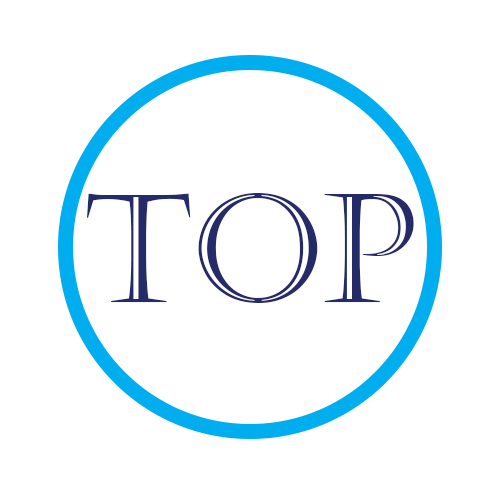
<style>
.page{position:relative;width:500px;height:500px;background:#ffffff}
.page>*{position:absolute;margin:0}
.t1{font:150px "Castellar";color:#252b68}
</style>
<div class="page">
<p class="t1" style="left:87px;top:193px;width:327px;height:110px">TOP</p>
</div>
